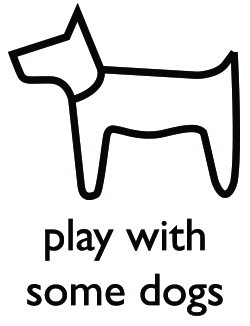
<style>
.page{position:relative;width:250px;height:326px;background:#ffffff}
.page>*{position:absolute;margin:0}
.t1{font:45.8px "GillSans";color:#060808}
</style>
<div class="page">
<p class="t1" style="left:27px;top:218px;width:196px;height:98px;text-align:center">play with some dogs</p>
</div>
